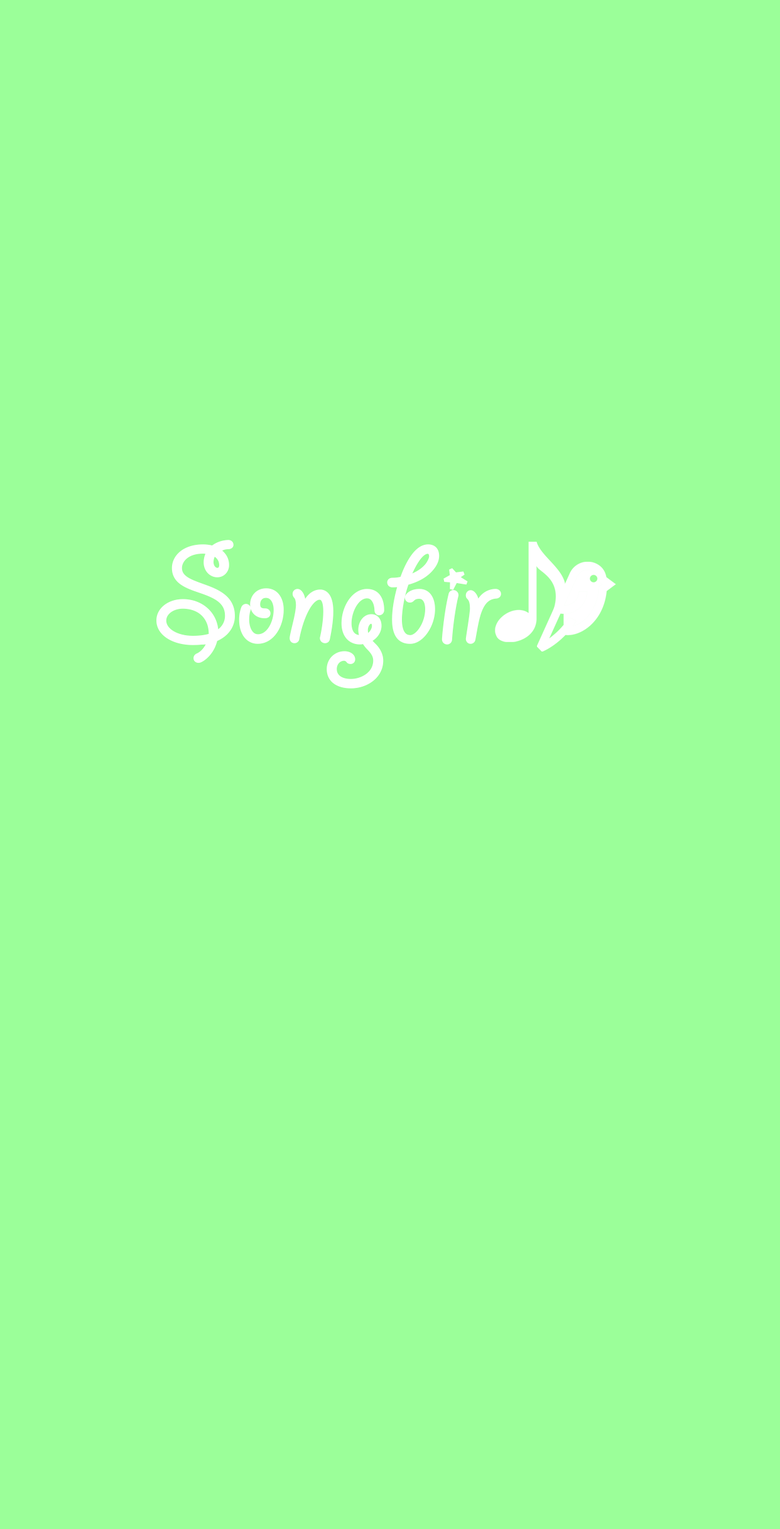
<style>
.page{position:relative;width:780px;height:1529px;background:#9bff99}
.page>*{position:absolute;margin:0}
.t1{font:146.7px "GiddyupStd";color:#ffffff;font-weight:bold}
</style>
<div class="page">
<p class="t1" style="left:156px;top:540px;width:345px;height:149px">Songbir</p>
</div>
